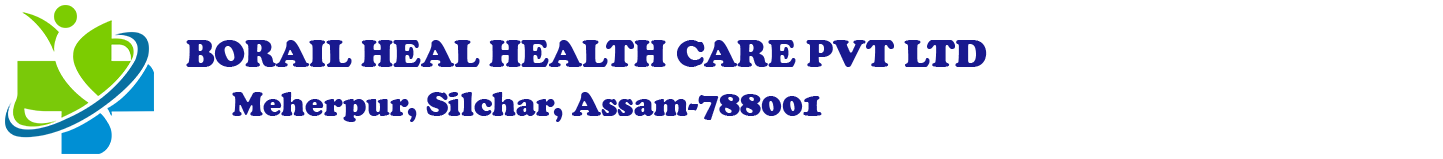
<style>
.page{position:relative;width:1443px;height:159px;background:#ffffff}
.page>*{position:absolute;margin:0}
.t1{font:40px "CooperBlack";color:#19198f}
.t2{font:35px "CooperBlack";color:#19198f}
</style>
<div class="page">
<p class="t1" style="left:186px;top:40px;width:801px;height:27px">BORAIL HEAL HEALTH CARE PVT LTD</p>
<p class="t2" style="left:232px;top:92px;width:590px;height:30px">Meherpur, Silchar, Assam-788001</p>
</div>
